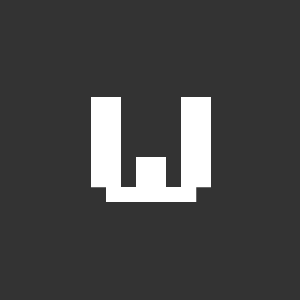
<style>
.page{position:relative;width:300px;height:300px;background:#333333}
.page>*{position:absolute;margin:0}
.t1{font:150px "Hardpixel";color:#ffffff}
</style>
<div class="page">
<p class="t1" style="left:91px;top:97px;width:120px;height:105px">W</p>
</div>
